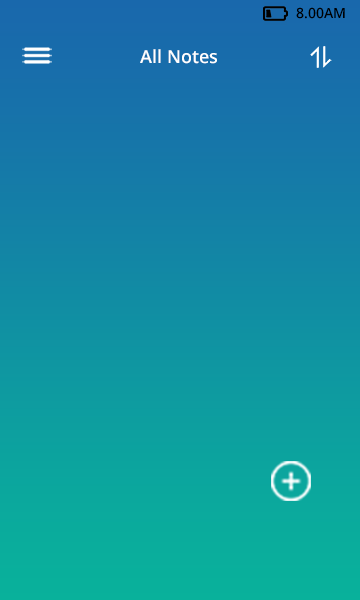
<style>
.page{position:relative;width:360px;height:600px}
.page>*{position:absolute;margin:0}
.t1{font:14px "OpenSans-Semibold";color:#000000}
.t2{font:18px "OpenSans-Semibold";color:#fbf8f8}
</style>
<div class="page">
<p class="t1" style="left:296px;top:7px;width:49px;height:12px">8.00AM</p>
<p class="t2" style="left:140px;top:49px;width:77px;height:15px">All Notes</p>
</div>
